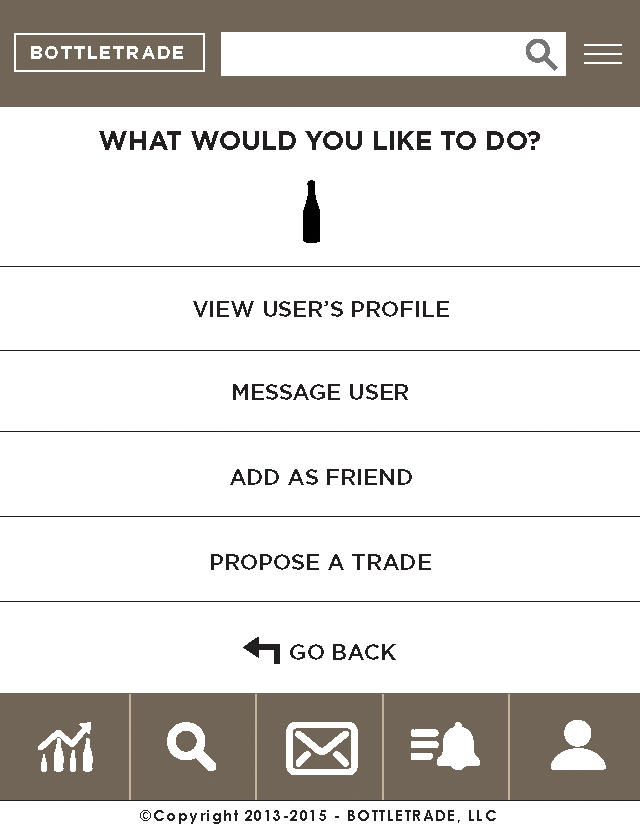
<style>
.page{position:relative;width:640px;height:832px;background:#ffffff}
.page>*{position:absolute;margin:0}
.t1{font:18px "Gotham-Bold";letter-spacing:0.099em;color:#ffffff}
.t2{font:26px "Gotham-Bold";color:#231f20}
.t3{font:22px "Gotham-Medium";color:#231f20}
.t4{font:15px "CenturyGothic-Bold";letter-spacing:0.099em;color:#231f20}
</style>
<div class="page">
<p class="t1" style="left:31px;top:46px;width:152px;height:13px">BOTTLETRADE</p>
<p class="t2" style="left:99px;top:131px;width:441px;height:19px">WHAT WOULD YOU LIKE TO DO?</p>
<p class="t3" style="left:193px;top:301px;width:256px;height:16px">VIEW USER’S PROFILE</p>
<p class="t3" style="left:233px;top:384px;width:175px;height:16px">MESSAGE USER</p>
<p class="t3" style="left:230px;top:469px;width:182px;height:16px">ADD AS FRIEND</p>
<p class="t3" style="left:211px;top:554px;width:220px;height:16px">PROPOSE A TRADE</p>
<p class="t3" style="left:290px;top:644px;width:106px;height:16px">GO BACK</p>
<p class="t4" style="left:140px;top:810px;width:356px;height:14px">©Copyright 2013-2015 - BOTTLETRADE, LLC</p>
</div>
